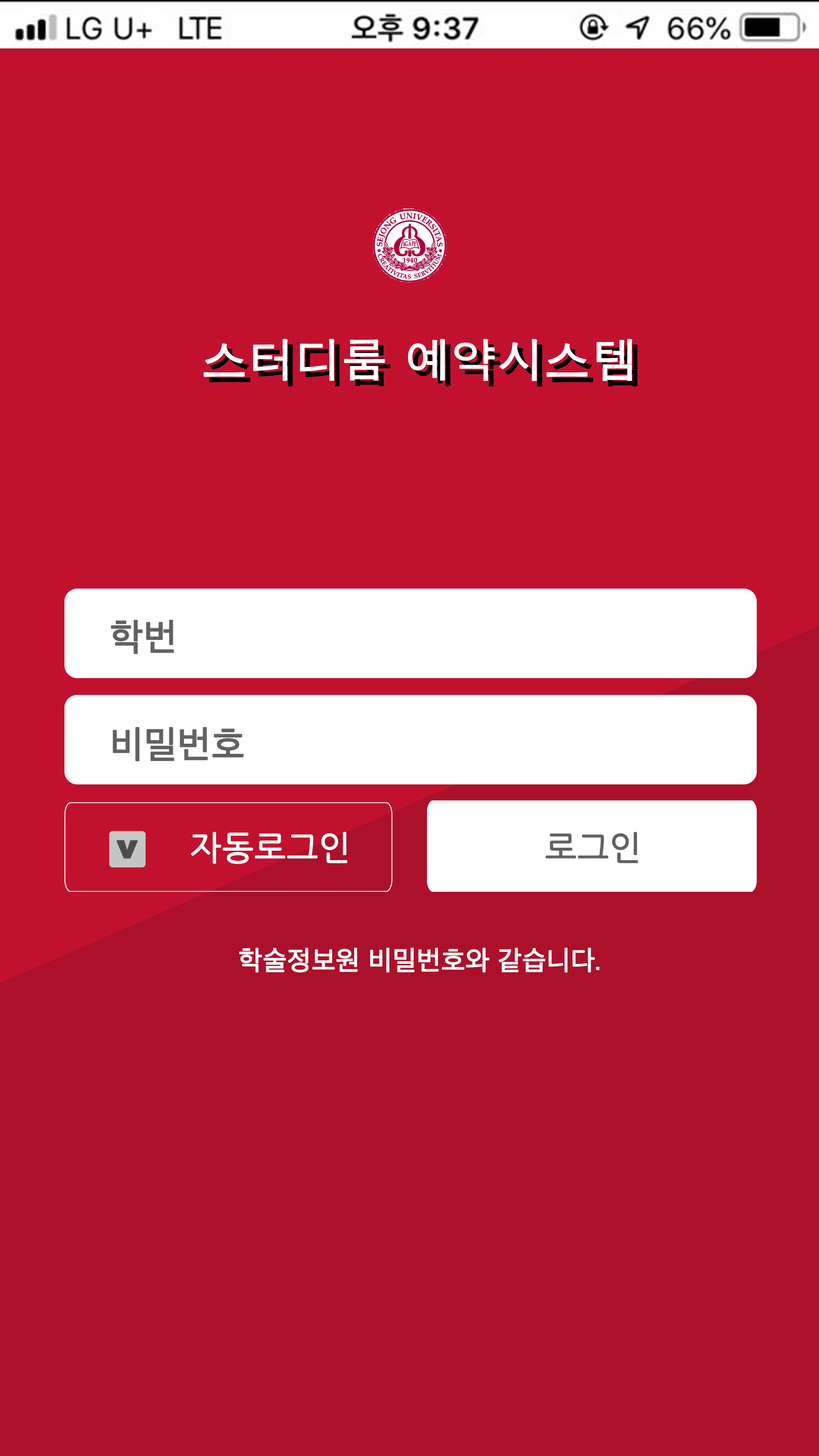
<style>
.page{position:relative;width:819px;height:1456px;background:#c2112e}
.page>*{position:absolute;margin:0}
.t1{font:37.9px "AppleSDGothicNeo-Regular";color:#626262;font-weight:bold}
.t2{font:33.4px "NanumGothic";color:#ffffff;font-weight:bold}
.t3{font:33.4px "NanumGothic";color:#626262;font-weight:bold}
.t4{font:27.3px "AppleSDGothicNeo-Regular";color:#ffffff;font-weight:bold}
</style>
<div class="page">
<p class="t1" style="left:111px;top:620px;width:63px;height:34px">학번</p>
<p class="t1" style="left:113px;top:727px;width:131px;height:34px">비밀번호</p>
<p class="t2" style="left:191px;top:832px;width:156px;height:32px">자동로그인</p>
<p class="t3" style="left:546px;top:832px;width:92px;height:31px">로그인</p>
<p class="t4" style="left:239px;top:947px;width:361px;height:26px">학술정보원 비밀번호와 같습니다.</p>
</div>
